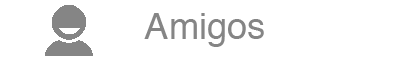
<style>
.page{position:relative;width:400px;height:61px;background:#ffffff}
.page>*{position:absolute;margin:0}
.t1{font:36.6px "Helvetica";color:#858585}
</style>
<div class="page">
<p class="t1" style="left:144px;top:13px;width:120px;height:34px">Amigos</p>
</div>
